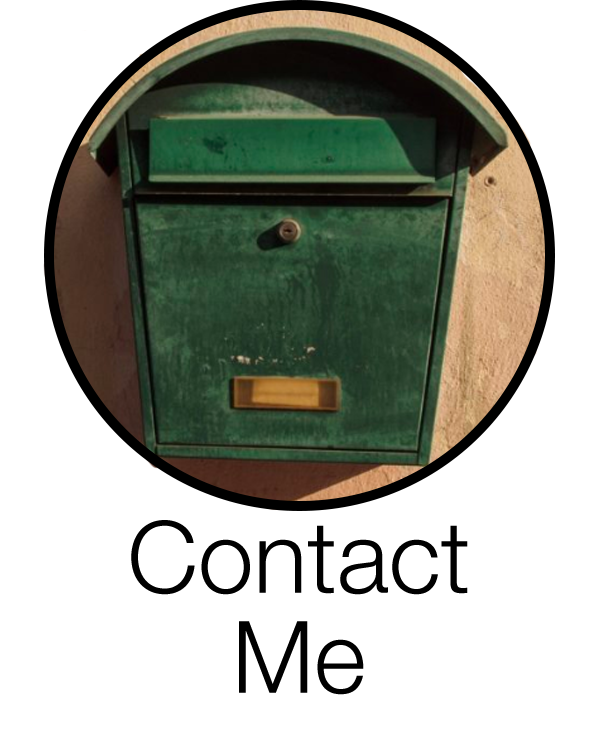
<style>
.page{position:relative;width:600px;height:750px;background:#ffffff}
.page>*{position:absolute;margin:0}
.t1{font:100px/100px "HelveticaNeue-Light";color:#000000}
</style>
<div class="page">
<p class="t1" style="left:131px;top:520px;width:337px;height:175px;text-align:center">Contact<br>Me</p>
</div>
